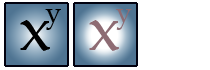
<style>
.page{position:relative;width:210px;height:70px;background:#ffffff}
.page>*{position:absolute;margin:0}
.t1{font:29.2px "BookAntiqua";color:#000000}
.t2{font:29.2px "BookAntiqua";color:#8e6b74}
.t3{font:63.2px "BookAntiqua";color:#000000}
.t4{font:63.2px "BookAntiqua";color:#8e6b74}
</style>
<div class="page">
<p class="t1" style="left:45px;top:9px;width:16px;height:21px">y</p>
<p class="t2" style="left:116px;top:9px;width:16px;height:21px">y</p>
<p class="t3" style="left:20px;top:20px;width:30px;height:31px">x</p>
<p class="t4" style="left:89px;top:20px;width:30px;height:31px">x</p>
</div>
